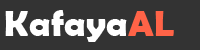
<style>
.page{position:relative;width:200px;height:50px;background:#333333}
.page>*{position:absolute;margin:0}
.t1{font:37.5px "BerlinSansFBDemi-Bold";color:#ffffff}
.t2{font:37.5px "BerlinSansFBDemi-Bold";color:#ff6347}
</style>
<div class="page">
<p class="t1" style="left:5px;top:10px;width:169px;height:32px">Kafaya<span class="t2">AL</span></p>
</div>
